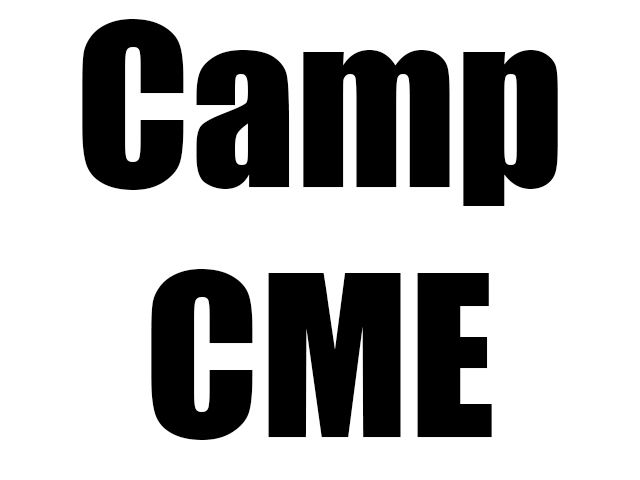
<style>
.page{position:relative;width:640px;height:480px;background:#ffffff}
.page>*{position:absolute;margin:0}
.t1{font:208.3px "Impact";color:#000000}
</style>
<div class="page">
<p class="t1" style="left:82px;top:19px;width:476px;height:421px;text-align:center">Camp<br>CME</p>
</div>
